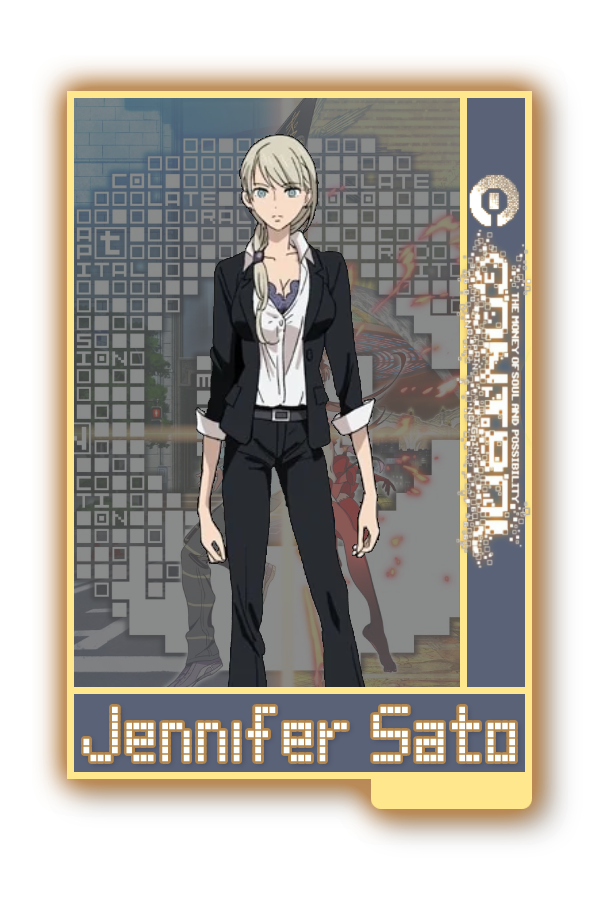
<style>
.page{position:relative;width:600px;height:900px;background:#ffffff}
.page>*{position:absolute;margin:0}
.t1{font:72.1px "Poxel-Font";color:#fdfffd;scale:0.89 1}
</style>
<div class="page">
<p class="t1" style="left:83px;top:706px;width:433px;height:56px">Jennifer Sato</p>
</div>
